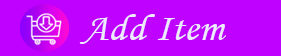
<style>
.page{position:relative;width:281px;height:56px;background:#bf01ff}
.page>*{position:absolute;margin:0}
.t1{font:37.5px "MonotypeCorsiva";color:#edeafe;scale:1.12 1}
</style>
<div class="page">
<p class="t1" style="left:79px;top:14px;width:147px;height:30px">Add Item</p>
</div>
